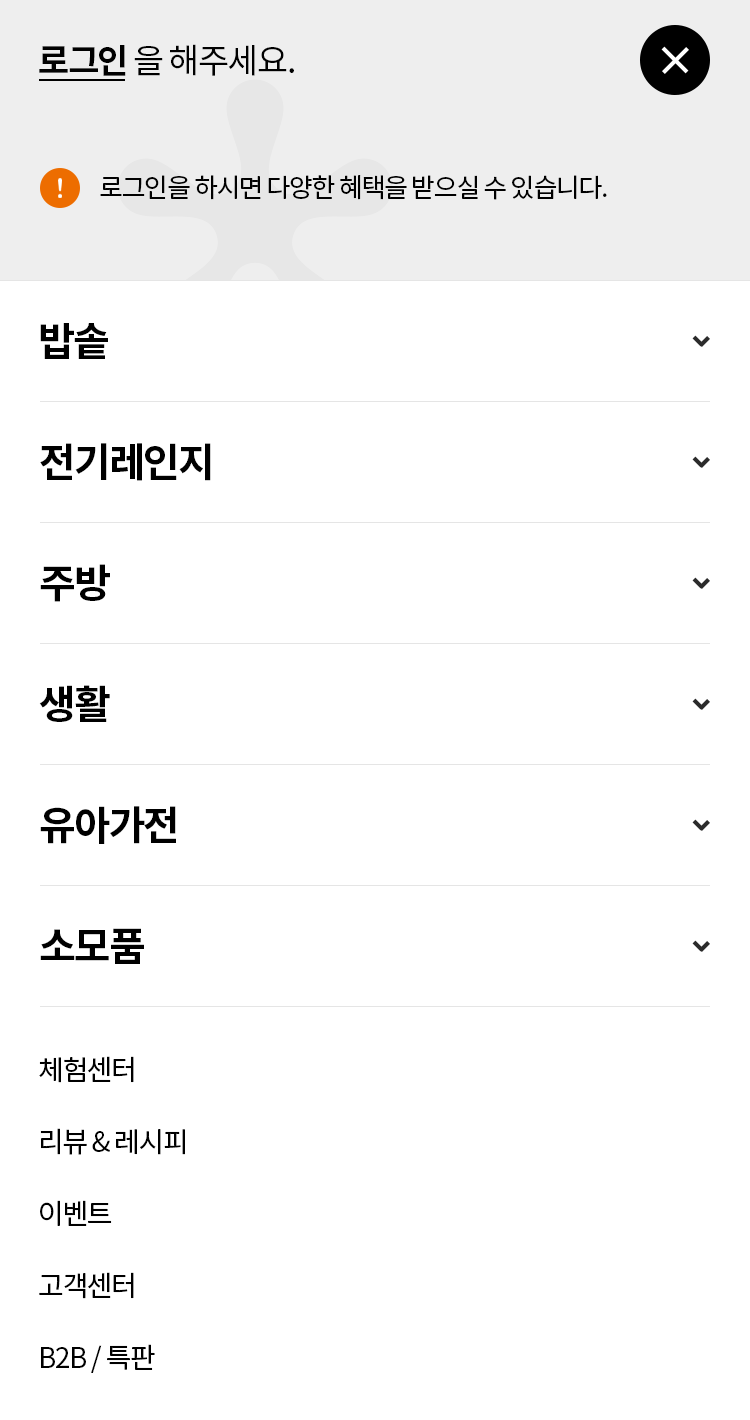
<style>
.page{position:relative;width:750px;height:1420px;background:#ffffff}
.page>*{position:absolute;margin:0}
.t1{font:34px "NotoSansCJKkr-Regular";letter-spacing:-0.05em;color:#000000}
.t2{font:34px "NotoSansCJKkr-Bold";letter-spacing:-0.05em;color:#000000}
.t3{font:26px "NotoSansCJKkr-Regular";letter-spacing:-0.05em;color:#000000}
.t4{font:40px "NotoSansCJKkr-Bold";letter-spacing:-0.05em;color:#000000}
.t5{font:28px/72px "NotoSansCJKkr-Regular";letter-spacing:-0.05em;color:#000000}
</style>
<div class="page">
<p class="t1" style="left:39px;top:44px;width:255px;height:32px"><span class="t2">로그인 </span>을 해주세요.</p>
<p class="t3" style="left:100px;top:175px;width:507px;height:25px">로그인을 하시면 다양한 혜택을 받으실 수 있습니다.</p>
<p class="t4" style="left:40px;top:323px;width:68px;height:36px">밥솥</p>
<p class="t4" style="left:40px;top:443px;width:171px;height:38px">전기레인지</p>
<p class="t4" style="left:40px;top:564px;width:70px;height:38px">주방</p>
<p class="t4" style="left:39px;top:685px;width:71px;height:37px">생활</p>
<p class="t4" style="left:40px;top:806px;width:136px;height:38px">유아가전</p>
<p class="t4" style="left:40px;top:928px;width:104px;height:36px">소모품</p>
<p class="t5" style="left:39px;top:1056px;width:146px;height:317px">체험센터<br>리뷰 &amp; 레시피<br>이벤트<br>고객센터<br>B2B / 특판</p>
</div>
